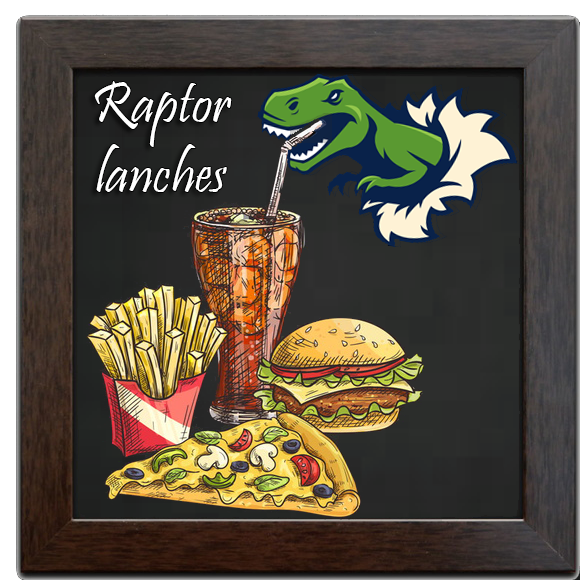
<style>
.page{position:relative;width:580px;height:580px}
.page>*{position:absolute;margin:0}
.t1{font:58.4px "Pristina-Regular";color:#ffffff}
</style>
<div class="page">
<p class="t1" style="left:94px;top:81px;width:138px;height:111px;text-align:center">Raptor<br>lanches</p>
</div>
